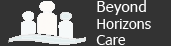
<style>
.page{position:relative;width:171px;height:46px;background:#333333}
.page>*{position:absolute;margin:0}
.t1{font:14px "Tahoma";color:#ffffff}
.t2{font:15px "Tahoma";color:#ffffff}
</style>
<div class="page">
<p class="t1" style="left:96px;top:0px;width:55px;height:45px"><span class="t2">Beyond<br></span>Horizons<br>Care</p>
</div>
